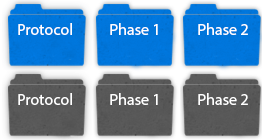
<style>
.page{position:relative;width:270px;height:140px}
.page>*{position:absolute;margin:0}
.t1{font:16px "MyriadPro-Regular";color:#ffffff}
</style>
<div class="page">
<p class="t1" style="left:18px;top:23px;width:54px;height:12px">Protocol</p>
<p class="t1" style="left:110px;top:23px;width:48px;height:12px">Phase 1</p>
<p class="t1" style="left:198px;top:23px;width:50px;height:12px">Phase 2</p>
<p class="t1" style="left:18px;top:93px;width:54px;height:12px">Protocol</p>
<p class="t1" style="left:110px;top:93px;width:48px;height:12px">Phase 1</p>
<p class="t1" style="left:198px;top:93px;width:50px;height:12px">Phase 2</p>
</div>
